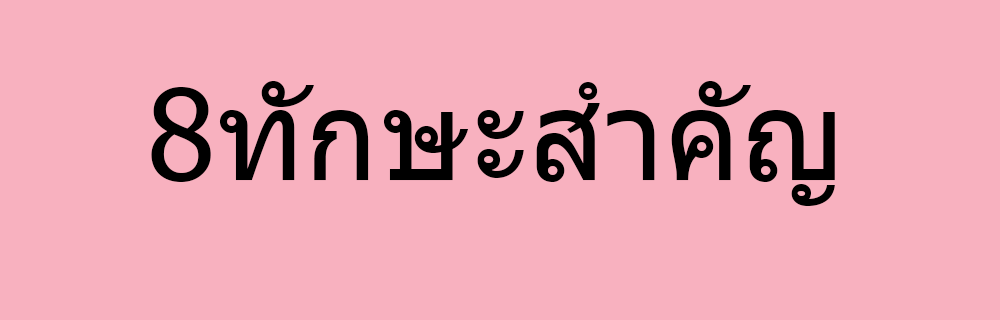
<style>
.page{position:relative;width:1000px;height:320px;background:#f8b1bf}
.page>*{position:absolute;margin:0}
.t1{font:125px "Tahoma";color:#000000}
</style>
<div class="page">
<p class="t1" style="left:151px;top:81px;width:684px;height:125px">8ทักษะสำคัญ</p>
</div>
